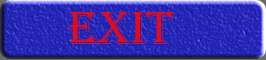
<style>
.page{position:relative;width:266px;height:60px}
.page>*{position:absolute;margin:0}
.t1{font:48px "Algerian";color:#d80e26}
</style>
<div class="page">
<p class="t1" style="left:68px;top:12px;width:107px;height:32px">EXIT</p>
</div>
